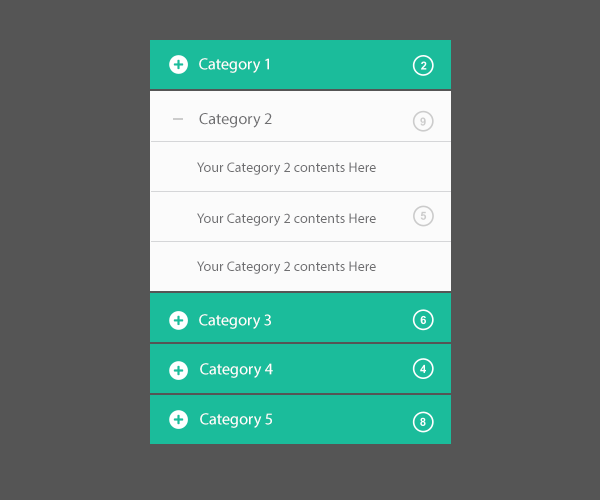
<style>
.page{position:relative;width:600px;height:500px;background:#555555}
.page>*{position:absolute;margin:0}
.t1{font:16px "MyriadPro-Regular";letter-spacing:0.005em;color:#ffffff}
.t2{font:16px "MyriadPro-Regular";letter-spacing:0.005em;color:#6f6f71}
.t3{font:14px "MyriadPro-Regular";letter-spacing:0.005em;color:#6f6f71}
</style>
<div class="page">
<p class="t1" style="left:199px;top:58px;width:70px;height:15px">Category 1</p>
<p class="t2" style="left:199px;top:113px;width:73px;height:15px">Category 2</p>
<p class="t3" style="left:197px;top:162px;width:179px;height:13px">Your Category 2 contents Here</p>
<p class="t3" style="left:197px;top:213px;width:179px;height:13px">Your Category 2 contents Here</p>
<p class="t3" style="left:197px;top:261px;width:179px;height:13px">Your Category 2 contents Here</p>
<p class="t1" style="left:199px;top:314px;width:72px;height:15px">Category 3</p>
<p class="t1" style="left:200px;top:363px;width:73px;height:15px">Category 4</p>
<p class="t1" style="left:200px;top:413px;width:72px;height:15px">Category 5</p>
</div>
